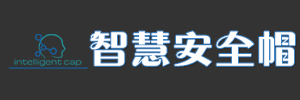
<style>
.page{position:relative;width:300px;height:100px;background:#333333}
.page>*{position:absolute;margin:0}
.t1{font:40px "FZCHYJW--GB1-0";color:#ffffff;scale:1.05 1}
</style>
<div class="page">
<p class="t1" style="left:90px;top:31px;width:205px;height:35px">智慧安全帽</p>
</div>
